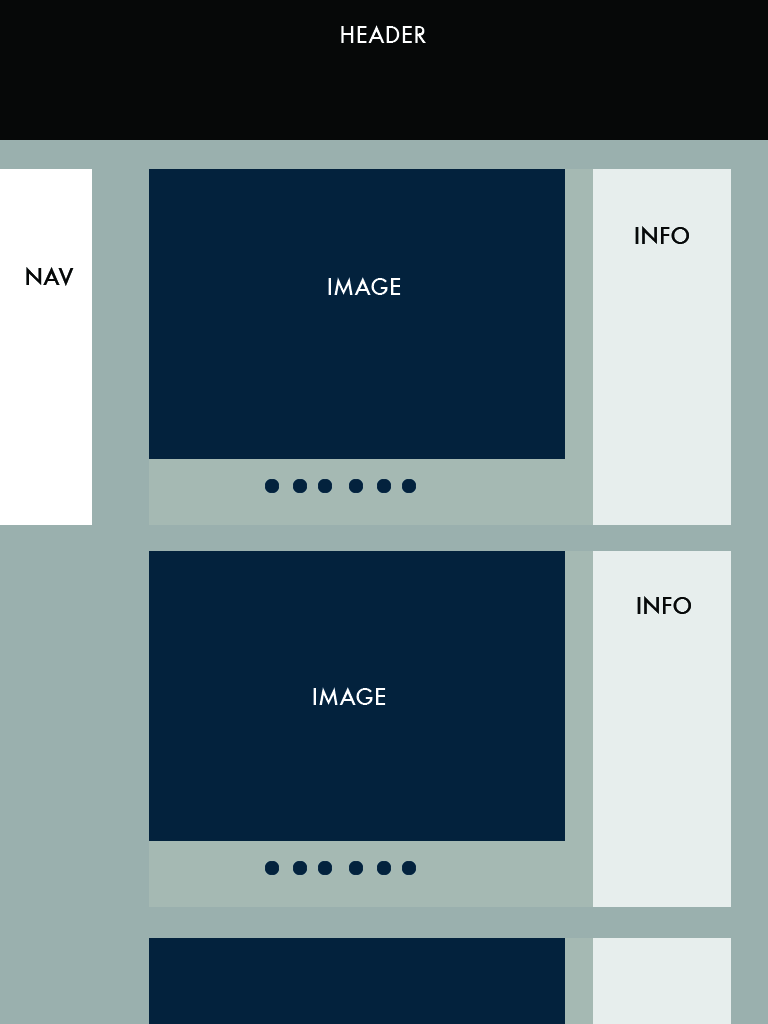
<style>
.page{position:relative;width:768px;height:1024px;background:#03223d}
.page>*{position:absolute;margin:0}
.t1{font:22.2px "Futura-Medium";color:#ffffff}
.t2{font:22.2px "Futura-Medium";color:#070909}
.t3{font:22.2px "Futura-Medium";color:#060808}
</style>
<div class="page">
<p class="t1" style="left:341px;top:25px;width:85px;height:18px">HEADER</p>
<p class="t2" style="left:635px;top:226px;width:54px;height:18px">INFO</p>
<p class="t3" style="left:26px;top:267px;width:48px;height:19px">NAV</p>
<p class="t1" style="left:328px;top:277px;width:73px;height:18px">IMAGE</p>
<p class="t2" style="left:637px;top:596px;width:54px;height:18px">INFO</p>
<p class="t1" style="left:313px;top:687px;width:73px;height:18px">IMAGE</p>
</div>
